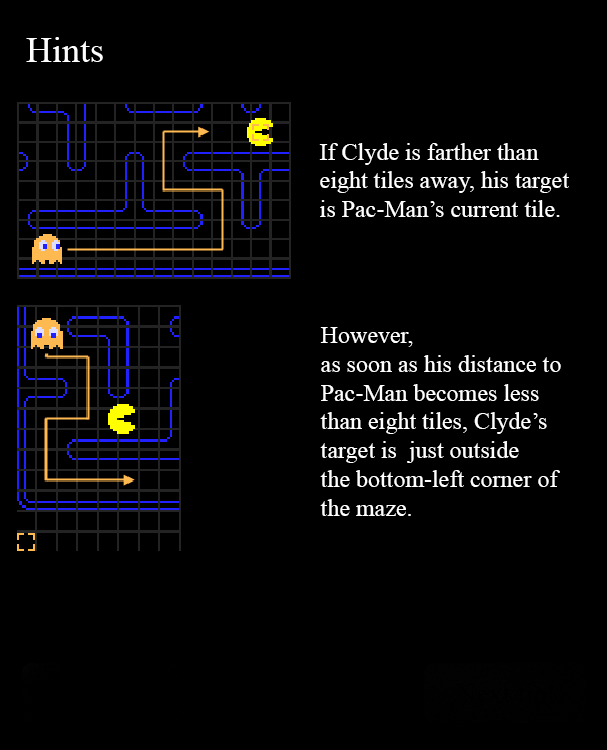
<style>
.page{position:relative;width:607px;height:750px;background:#000000}
.page>*{position:absolute;margin:0}
.t1{font:24px "TimesNewRomanPSMT";color:#ffffff}
</style>
<div class="page">
<p class="t1" style="left:319px;top:143px;width:250px;height:74px">If Clyde is farther than <br>eight tiles away, his target<br>is Pac-Man’s current tile.</p>
<p class="t1" style="left:320px;top:327px;width:241px;height:189px">However,<br>as soon as his distance to <br>Pac-Man becomes less <br>than eight tiles, Clyde’s <br>target is  just outside <br>the bottom-left corner of <br>the maze.</p>
</div>
